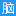
<style>
.page{position:relative;width:16px;height:16px;background:#2196f3}
.page>*{position:absolute;margin:0}
.t1{font:13px "SourceHanSansCN-ExtraLight";letter-spacing:0.01em;color:#ffffff}
</style>
<div class="page">
<p class="t1" style="left:2px;top:2px;width:13px;height:13px">脑</p>
</div>
